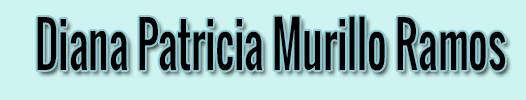
<style>
.page{position:relative;width:526px;height:100px;background:#cdf4f0}
.page>*{position:absolute;margin:0}
.t1{font:60.5px "Oswald-Regular";color:#000000;scale:0.69 1}
</style>
<div class="page">
<p class="t1" style="left:37px;top:16px;width:469px;height:55px">Diana Patricia Murillo Ramos</p>
</div>
